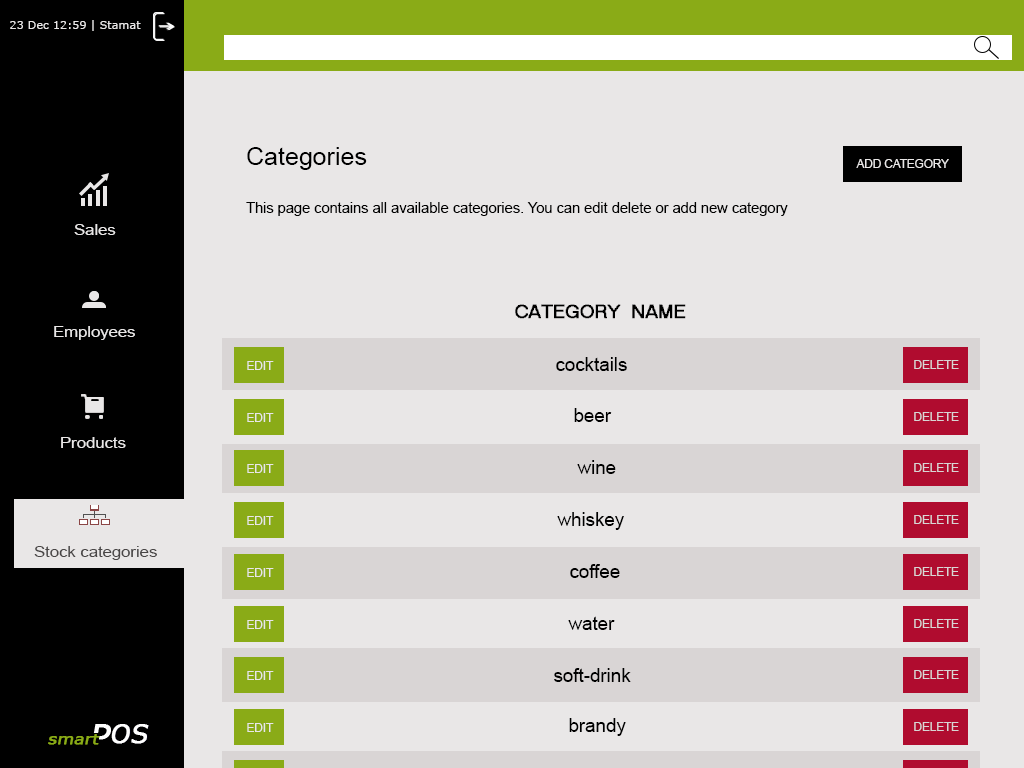
<style>
.page{position:relative;width:1024px;height:768px;background:#e9e7e7}
.page>*{position:absolute;margin:0}
.t1{font:11.2px "Verdana";color:#e9e7e7}
.t2{font:14.6px "ArialMT";color:#000000}
.t3{font:25px "ArialMT";color:#000000}
.t4{font:11.7px "ArialMT";color:#e9e7e7}
.t5{font:15px "ArialMT";color:#e9e7e7;scale:1.11 1}
.t6{font:18.8px "MS Sans Serif";color:#000000;font-weight:bold}
.t7{font:18.8px "ArialMT";color:#000000}
.t8{font:11.7px "ArialMT";color:#d9d5d5}
.t9{font:15px "ArialMT";color:#494646;scale:1.11 1}
.t10{font:25px "Verdana";color:#ffffff;font-weight:bold;font-style:italic}
.t11{font:15px "Verdana";color:#8aab17;font-weight:bold;font-style:italic;scale:1.11 1}
</style>
<div class="page">
<p class="t1" style="left:10px;top:20px;width:131px;height:11px">23 Dec 12:59 | Stamat</p>
<p class="t2" style="left:246px;top:147px;width:542px;height:69px"><span class="t3">Categories<br><br></span>This page contains all available categories. You can edit delete or add new category</p>
<p class="t4" style="left:856px;top:159px;width:93px;height:9px">ADD CATEGORY</p>
<p class="t5" style="left:74px;top:224px;width:42px;height:11px">Sales</p>
<p class="t6" style="left:515px;top:304px;width:171px;height:15px">CATEGORY  NAME</p>
<p class="t5" style="left:54px;top:326px;width:81px;height:14px">Employees</p>
<p class="t4" style="left:247px;top:361px;width:27px;height:9px">EDIT</p>
<p class="t7" style="left:556px;top:357px;width:71px;height:14px">cocktails</p>
<p class="t8" style="left:914px;top:360px;width:45px;height:9px">DELETE</p>
<p class="t4" style="left:247px;top:413px;width:27px;height:9px">EDIT</p>
<p class="t7" style="left:574px;top:408px;width:38px;height:14px">beer</p>
<p class="t8" style="left:914px;top:412px;width:45px;height:9px">DELETE</p>
<p class="t5" style="left:61px;top:437px;width:65px;height:11px">Products</p>
<p class="t7" style="left:577px;top:460px;width:39px;height:14px">wine</p>
<p class="t4" style="left:247px;top:464px;width:27px;height:9px">EDIT</p>
<p class="t8" style="left:914px;top:463px;width:45px;height:9px">DELETE</p>
<p class="t4" style="left:247px;top:516px;width:27px;height:9px">EDIT</p>
<p class="t7" style="left:557px;top:512px;width:67px;height:18px">whiskey</p>
<p class="t8" style="left:914px;top:515px;width:45px;height:9px">DELETE</p>
<p class="t9" style="left:34px;top:546px;width:123px;height:14px">Stock categories</p>
<p class="t4" style="left:247px;top:568px;width:27px;height:9px">EDIT</p>
<p class="t7" style="left:570px;top:564px;width:50px;height:14px">coffee</p>
<p class="t8" style="left:914px;top:567px;width:45px;height:9px">DELETE</p>
<p class="t7" style="left:568px;top:616px;width:47px;height:14px">water</p>
<p class="t4" style="left:247px;top:620px;width:27px;height:9px">EDIT</p>
<p class="t8" style="left:914px;top:619px;width:45px;height:9px">DELETE</p>
<p class="t4" style="left:247px;top:671px;width:27px;height:9px">EDIT</p>
<p class="t7" style="left:554px;top:668px;width:77px;height:14px">soft-drink</p>
<p class="t8" style="left:914px;top:670px;width:45px;height:9px">DELETE</p>
<p class="t10" style="left:111px;top:724px;width:38px;height:20px">OS</p>
<p class="t10" style="left:112px;top:724px;width:38px;height:20px">OS</p>
<p class="t4" style="left:247px;top:723px;width:27px;height:9px">EDIT</p>
<p class="t7" style="left:569px;top:718px;width:57px;height:18px">brandy</p>
<p class="t8" style="left:914px;top:722px;width:45px;height:9px">DELETE</p>
<p class="t11" style="left:48px;top:734px;width:52px;height:11px">smart</p>
</div>
